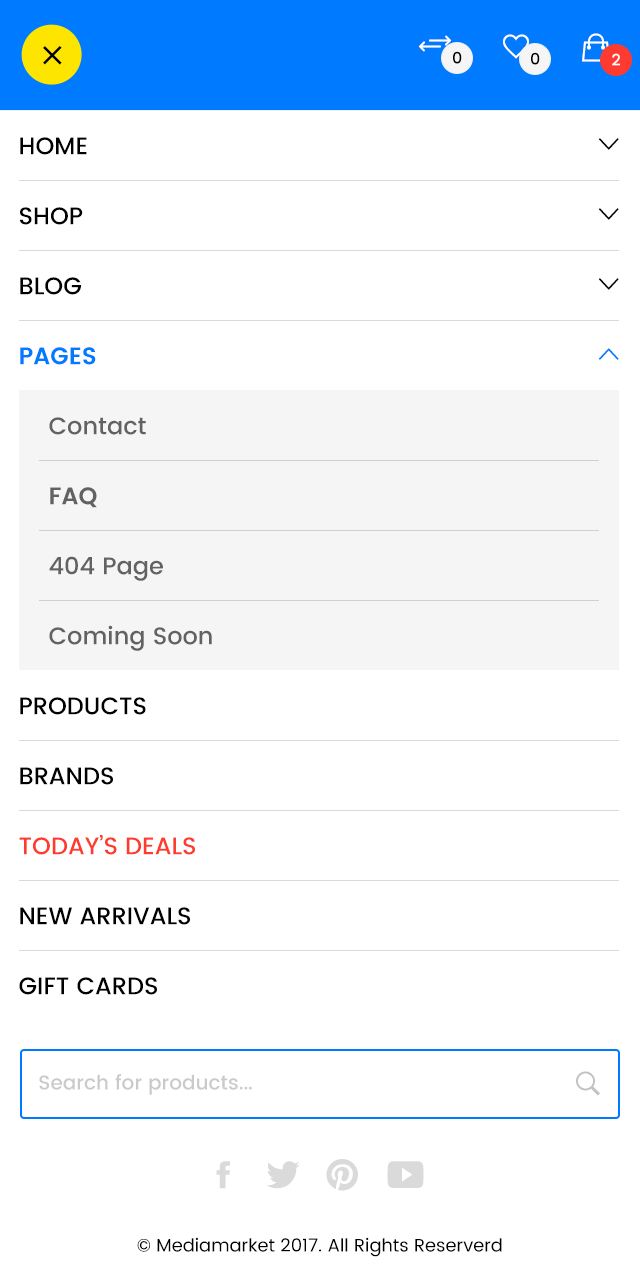
<style>
.page{position:relative;width:640px;height:1280px;background:#ffffff}
.page>*{position:absolute;margin:0}
.t1{font:16px "Poppins-Medium";color:#000000;text-transform:uppercase}
.t2{font:16px "Poppins-Medium";color:#ffffff;text-transform:uppercase}
.t3{font:24px/70px "Poppins-Medium";color:#000000;text-transform:uppercase}
.t4{font:24px/70px "Poppins-SemiBold";color:#007aff;text-transform:uppercase}
.t5{font:24px/70px "Poppins-Medium";color:#ff3b30;text-transform:uppercase}
.t6{font:24px/70px "Poppins-Medium";color:#626262}
.t7{font:24px/70px "Poppins-SemiBold";color:#626262}
.t8{font:20px "Poppins-Medium";color:#cacaca}
.t9{font:18px "Poppins-Regular";color:#000000}
</style>
<div class="page">
<p class="t1" style="left:453px;top:51px;width:9px;height:13px">0</p>
<p class="t1" style="left:531px;top:52px;width:9px;height:13px">0</p>
<p class="t2" style="left:612px;top:53px;width:8px;height:13px">2</p>
<p class="t3" style="left:19px;top:137px;width:176px;height:858px">Home<br>Shop<br>Blog<br><span class="t4">Pages<br></span><br><br><br><br>Products<br>Brands<br><span class="t5">Today’s deals<br></span>new arrivals<br>gift cards</p>
<p class="t6" style="left:49px;top:417px;width:163px;height:234px">Contact<br><span class="t7">FAQ<br></span>404 Page<br>Coming Soon</p>
<p class="t8" style="left:39px;top:1074px;width:213px;height:21px">Search for products...</p>
<p class="t9" style="left:137px;top:1237px;width:365px;height:20px">© Mediamarket 2017. All Rights Reserverd</p>
</div>
